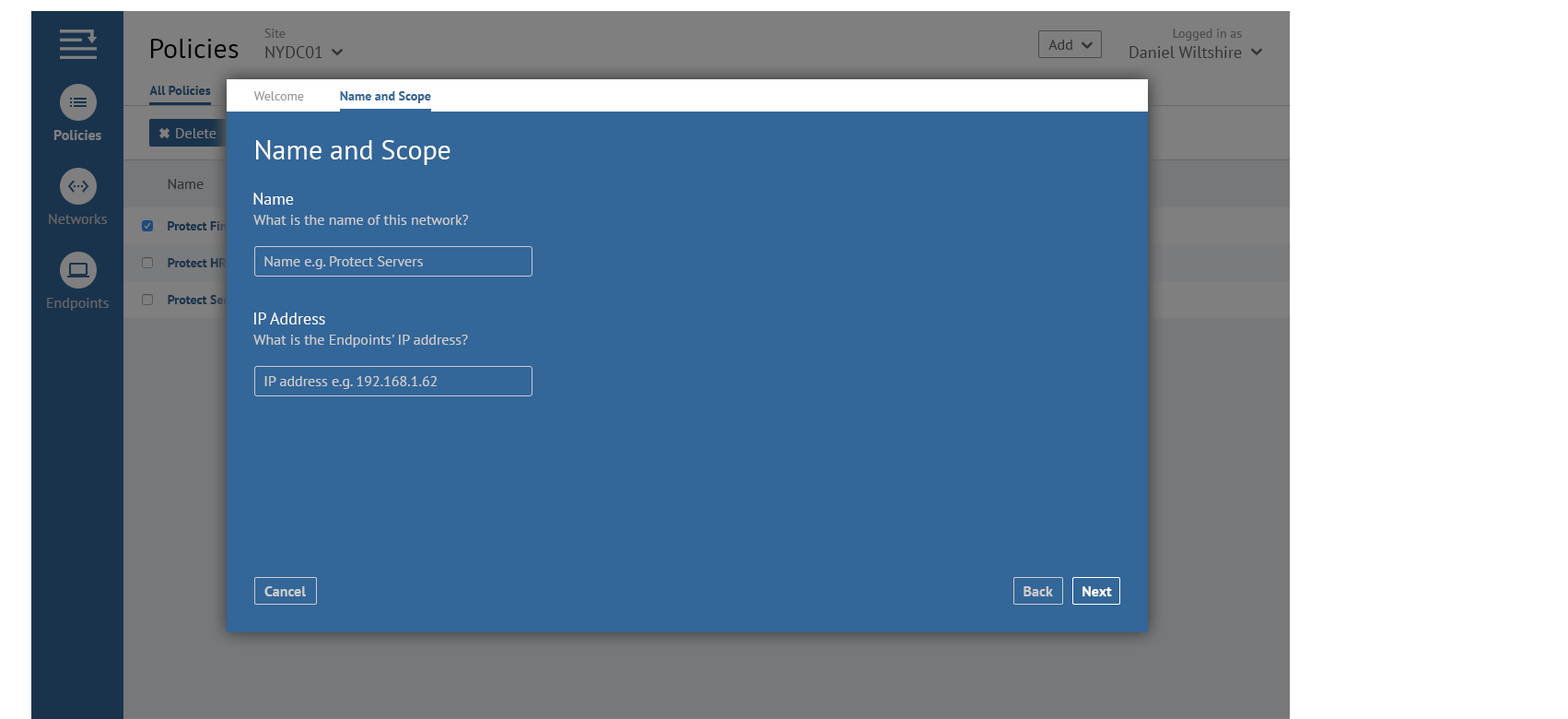
<style>
.page{position:relative;width:1568px;height:719px;background:#336699}
.page>*{position:absolute;margin:0}
.t1{font:16.6px "PTSans-Regular"}
.t2{font:12.9px "PTSans-Regular"}
.t3{font:16.8px "PTSans-Regular"}
.t4{font:13.1px "PTSans-Regular"}
.t5{font:27.6px "PTSans-Regular";color:#000000}
.t6{font:14.7px "PTSans-Regular";color:#333333}
.t7{font:12.8px "PTSans-Bold";color:#19334c}
.t8{font:12.8px "PTSans-Regular";color:#999999}
.t9{font:12.8px "PTSans-Bold";color:#336699}
.t10{font:14.7px "PTSans-Bold";color:#7f7f7f}
.t11{font:14.7px "PTSans-Regular";color:#7f7f7f}
.t12{font:27.6px "PTSans-Regular";color:#ffffff}
.t13{font:16.6px "PTSans-Regular";color:#ffffff}
.t14{font:14.7px "PTSans-Regular";color:#666666}
.t15{font:12.9px "PTSans-Bold"}
.t16{font:14.7px "PTSans-Regular";color:#cccccc}
.t17{font:12.9px "PTSans-Bold";color:#19334c}
.t18{font:14.7px "PTSans-Bold";color:#cccccc}
.t19{font:14.7px "PTSans-Bold";color:#ffffff}
</style>
<div class="page">
<p class="t1" style="left:264px;top:29px;width:58px;height:29px"><span class="t2">Site<br></span>NYDC01</p>
<p class="t3" style="left:1129px;top:29px;width:113px;height:29px;text-align:right"><span class="t4">Logged in as<br></span>Daniel Wiltshire</p>
<p class="t5" style="left:151px;top:39px;width:88px;height:19px">Policies</p>
<p class="t6" style="left:1048px;top:40px;width:24px;height:10px">Add</p>
<p class="t7" style="left:149px;top:86px;width:62px;height:9px">All Policies</p>
<p class="t8" style="left:253px;top:91px;width:51px;height:9px">Welcome</p>
<p class="t9" style="left:340px;top:91px;width:91px;height:12px">Name and Scope</p>
<p class="t10" style="left:53px;top:130px;width:48px;height:10px">Policies</p>
<p class="t11" style="left:176px;top:128px;width:40px;height:10px">Delete</p>
<p class="t12" style="left:256px;top:140px;width:195px;height:25px">Name and Scope</p>
<p class="t6" style="left:168px;top:179px;width:36px;height:10px">Name</p>
<p class="t13" style="left:253px;top:193px;width:41px;height:12px">Name</p>
<p class="t14" style="left:49px;top:214px;width:58px;height:10px">Networks</p>
<p class="t15" style="left:168px;top:221px;width:84px;height:9px">Protect Finance</p>
<p class="t16" style="left:253px;top:215px;width:215px;height:10px">What is the name of this network?</p>
<p class="t17" style="left:168px;top:258px;width:59px;height:9px">Protect HR</p>
<p class="t16" style="left:264px;top:256px;width:159px;height:13px">Name e.g. Protect Servers</p>
<p class="t14" style="left:47px;top:298px;width:62px;height:12px">Endpoints</p>
<p class="t15" style="left:168px;top:295px;width:83px;height:9px">Protect Servers</p>
<p class="t13" style="left:254px;top:312px;width:71px;height:12px">IP Address</p>
<p class="t16" style="left:253px;top:334px;width:215px;height:13px">What is the Endpoints' IP address?</p>
<p class="t16" style="left:264px;top:376px;width:173px;height:13px">IP address e.g. 192.168.1.62</p>
<p class="t18" style="left:264px;top:586px;width:42px;height:10px">Cancel</p>
<p class="t18" style="left:1024px;top:586px;width:29px;height:10px">Back</p>
<p class="t19" style="left:1082px;top:586px;width:30px;height:10px">Next</p>
</div>
